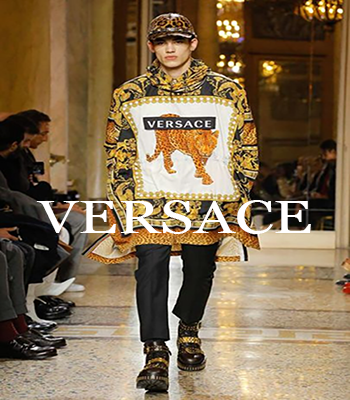
<style>
.page{position:relative;width:350px;height:400px}
.page>*{position:absolute;margin:0}
.t1{font:46.1px "Georgia";color:#fffefe;scale:1.31 1}
</style>
<div class="page">
<p class="t1" style="left:36px;top:200px;width:275px;height:34px">VERSACE</p>
</div>
